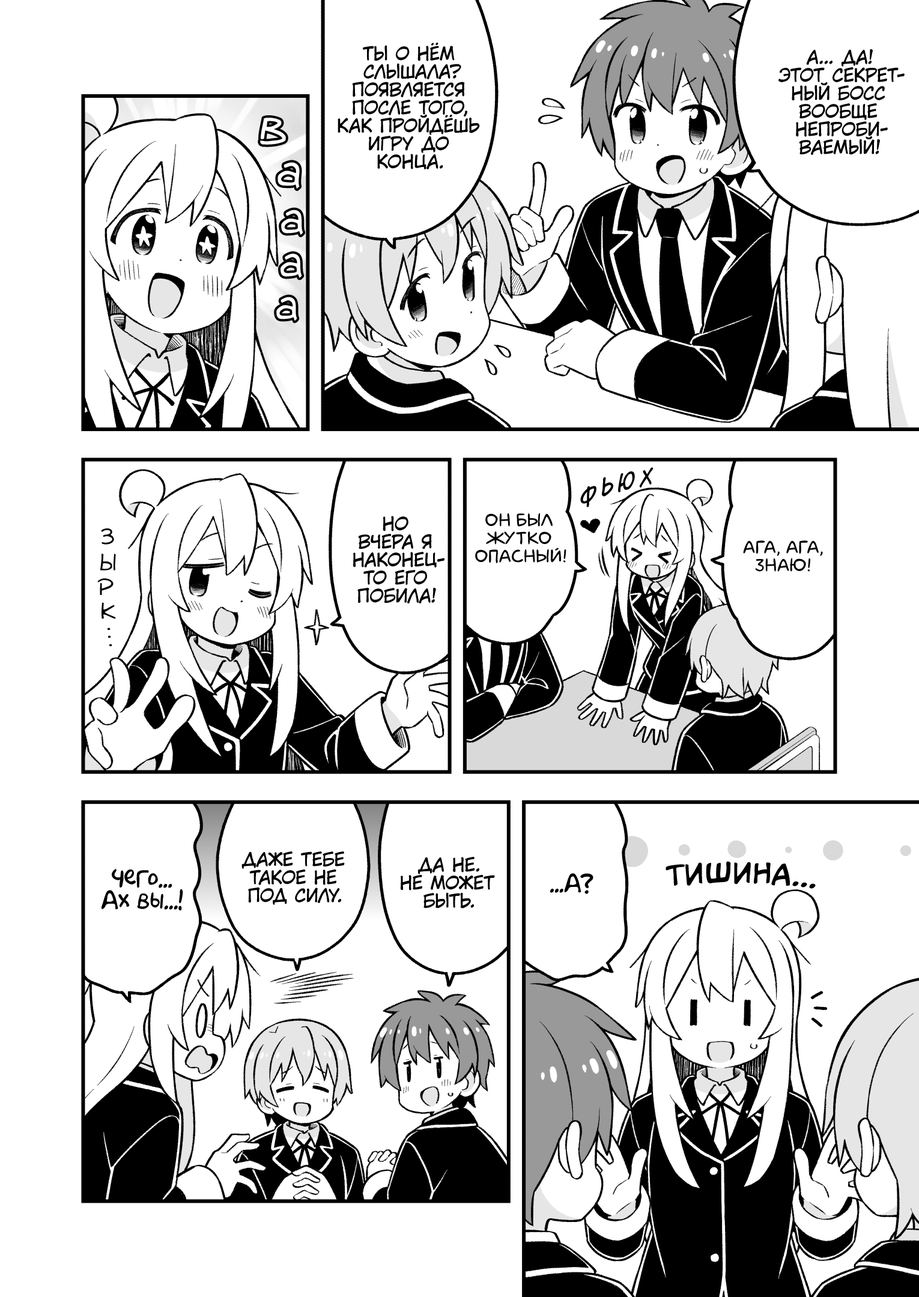
<style>
.page{position:relative;width:919px;height:1297px;background:#ffffff}
.page>*{position:absolute;margin:0}
.t1{font:18px "KuraiVoice2";color:#000000;text-transform:uppercase}
.t2{font:48.7px "v_Augie";color:#ffffff}
.t3{font:47.5px "v_Augie";color:#ffffff}
.t4{font:46.3px "v_Augie";color:#ffffff}
.t5{font:45.1px "v_Augie";color:#ffffff}
.t6{font:43.8px "v_Augie";color:#ffffff}
.t7{font:21px "v_CCDearDiary";color:#000000;text-transform:uppercase}
.t8{font:19.8px "v_CCDearDiary";color:#000000;text-transform:uppercase}
.t9{font:23.4px "v_CCDearDiary";color:#000000;text-transform:uppercase}
.t10{font:22.2px "v_CCDearDiary";color:#000000;text-transform:uppercase}
.t11{font:18px "laCartoonerie";color:#000000;text-transform:uppercase}
.t12{font:21.6px "v_Augie";color:#000000;text-transform:uppercase}
.t13{font:21.6px "AkbarPlain";color:#000000}
.t14{font:25.2px "CCMeanwhile";color:#000000;text-transform:uppercase;scale:1.2 1}
.t15{font:25.2px "CCMeanwhile";color:#ffffff;text-transform:uppercase;scale:1.2 1}
</style>
<div class="page">
<p class="t1" style="left:338px;top:43px;width:142px;height:127px;text-align:center">Ты о нём<br>слышала?<br>Появляется<br>после того,<br>как пройдёшь<br>игру до<br>конца.</p>
<p class="t1" style="left:778px;top:49px;width:127px;height:106px;text-align:center">А... Да!<br>Этот секрет-<br>ный босс<br>вообще<br>непроби-<br>ваемый!</p>
<p class="t2" style="left:260px;top:118px;width:26px;height:27px;rotate:10deg">в</p>
<p class="t3" style="left:278px;top:162px;width:22px;height:27px;rotate:13deg">а</p>
<p class="t4" style="left:281px;top:210px;width:22px;height:25px;rotate:7deg">а</p>
<p class="t5" style="left:281px;top:253px;width:21px;height:25px;rotate:7deg">а</p>
<p class="t6" style="left:276px;top:297px;width:21px;height:24px;rotate:8deg">а</p>
<p class="t7" style="left:618px;top:472px;width:17px;height:21px;rotate:-11deg">ю</p>
<p class="t8" style="left:639px;top:467px;width:15px;height:21px;rotate:-10deg">х</p>
<p class="t9" style="left:580px;top:486px;width:16px;height:22px;rotate:-19deg">ф</p>
<p class="t10" style="left:602px;top:477px;width:11px;height:20px;rotate:-17deg">ь</p>
<p class="t1" style="left:353px;top:516px;width:92px;height:88px;text-align:center">Но<br>вчера я<br>наконец-<br>то его<br>побила!</p>
<p class="t11" style="left:475px;top:513px;width:91px;height:50px;text-align:center">Он был<br>жутко<br>опасный!</p>
<p class="t12" style="left:101px;top:529px;width:13px;height:16px">з</p>
<p class="t11" style="left:743px;top:541px;width:80px;height:31px;text-align:center">Ага, ага,<br>знаю!</p>
<p class="t12" style="left:100px;top:554px;width:16px;height:17px">ы</p>
<p class="t12" style="left:97px;top:578px;width:17px;height:17px">р</p>
<p class="t12" style="left:102px;top:602px;width:14px;height:17px">к</p>
<p class="t12" style="left:108px;top:628px;width:3px;height:3px">.</p>
<p class="t12" style="left:108px;top:636px;width:3px;height:3px">.</p>
<p class="t12" style="left:109px;top:644px;width:3px;height:3px">.</p>
<p class="t1" style="left:241px;top:852px;width:104px;height:53px;text-align:center">Даже тебе<br>такое не<br>под силу.</p>
<p class="t1" style="left:401px;top:857px;width:94px;height:52px;text-align:center">Да не.<br>Не может<br>быть.</p>
<p class="t13" style="left:102px;top:869px;width:81px;height:42px;text-align:center">Чего...<br>Ах вы...!</p>
<p class="t14" style="left:646px;top:861px;width:170px;height:28px"><span class="t15">...</span>тишина...</p>
<p class="t13" style="left:550px;top:873px;width:43px;height:21px">...А?</p>
</div>
